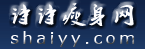
<style>
.page{position:relative;width:145px;height:49px}
.page>*{position:absolute;margin:0}
.t1{font:22.6px "Ò¶¸ùÓÑÃ«±ÊÐÐÊé¼òÌå";letter-spacing:0.15em;color:#fcfcfd}
.t2{font:16.7px "MSReferenceSansSerif";letter-spacing:0.2em}
</style>
<div class="page">
<p class="t1" style="left:12px;top:3px;width:122px;height:23px">诗诗瘦身网</p>
<p class="t2" style="left:11px;top:31px;width:124px;height:16px">shaiyy.com</p>
</div>
